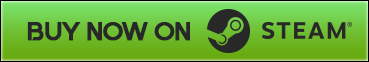
<style>
.page{position:relative;width:369px;height:62px}
.page>*{position:absolute;margin:0}
.t1{font:25.8px "Quantify-Bold";color:#282828;font-weight:bold}
</style>
<div class="page">
<p class="t1" style="left:27px;top:22px;width:163px;height:19px">BUY NOW ON</p>
</div>
